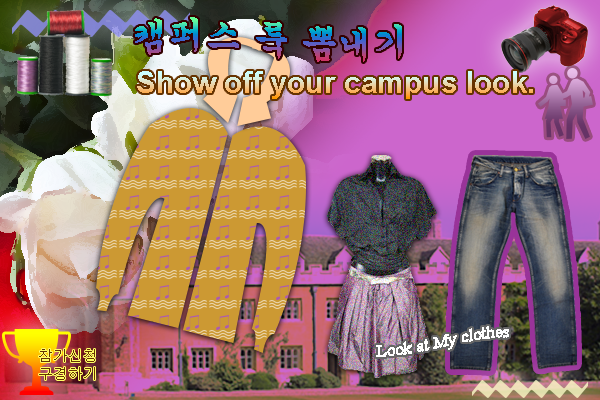
<style>
.page{position:relative;width:600px;height:400px}
.page>*{position:absolute;margin:0}
.t1{font:36px "Gungsuh"}
.t2{font:30px "Arial-BoldMT"}
.t3{font:17px "TimesNewRomanPSMT";color:#ffffff}
.t4{font:15px "Dotum";color:#663300}
</style>
<div class="page">
<p class="t1" style="left:135px;top:17px;width:267px;height:45px">캠퍼스 룩 뽐내기</p>
<p class="t2" style="left:137px;top:71px;width:396px;height:28px">Show off your campus look.</p>
<p class="t3" style="left:376px;top:326px;width:133px;height:31px">Look at My clothes</p>
<p class="t4" style="left:39px;top:349px;width:56px;height:31px">참가신청<br>구경하기</p>
</div>
